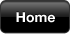
<style>
.page{position:relative;width:70px;height:34px;background:#000000}
.page>*{position:absolute;margin:0}
.t1{font:13.8px "HelveticaNeue-Bold";color:#ffffff}
</style>
<div class="page">
<p class="t1" style="left:16px;top:12px;width:39px;height:11px">Home</p>
</div>
